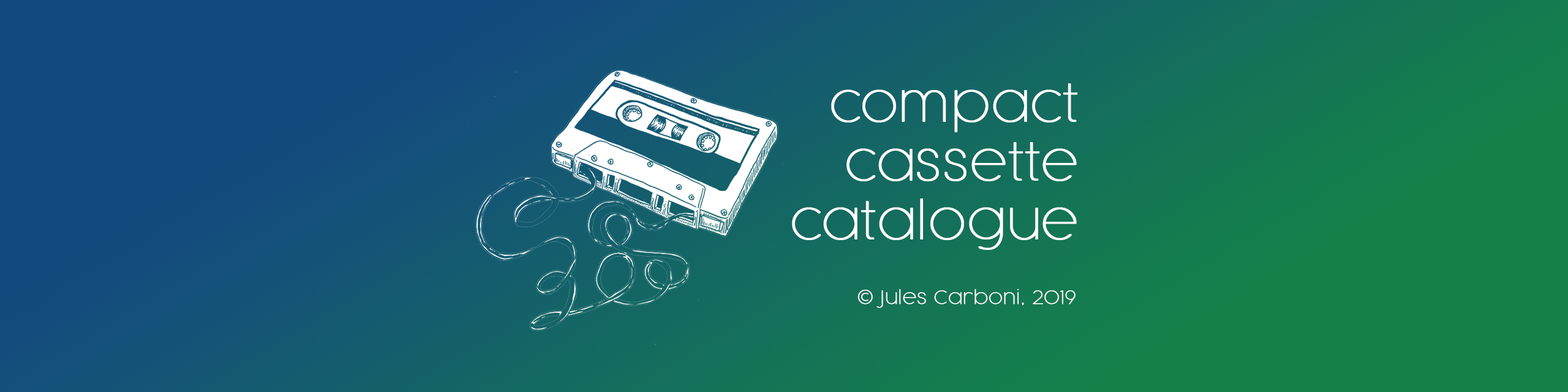
<style>
.page{position:relative;width:1568px;height:392px}
.page>*{position:absolute;margin:0}
.t1{font:49px "CocogoosePro-Thin";color:#ffffff;font-weight:bold}
.t2{font:18.4px "CocogoosePro-Thin";color:#ffffff;font-weight:bold}
</style>
<div class="page">
<p class="t1" style="left:792px;top:83px;width:286px;height:167px;text-align:right">compact<br>cassette<br>catalogue</p>
<p class="t2" style="left:858px;top:289px;width:218px;height:19px">© Jules Carboni, 2019</p>
</div>
